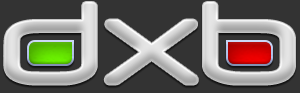
<style>
.page{position:relative;width:300px;height:93px;background:#333333}
.page>*{position:absolute;margin:0}
.t1{font:139px "Neuropol"}
</style>
<div class="page">
<p class="t1" style="left:4px;top:2px;width:291px;height:83px">dxb</p>
</div>
